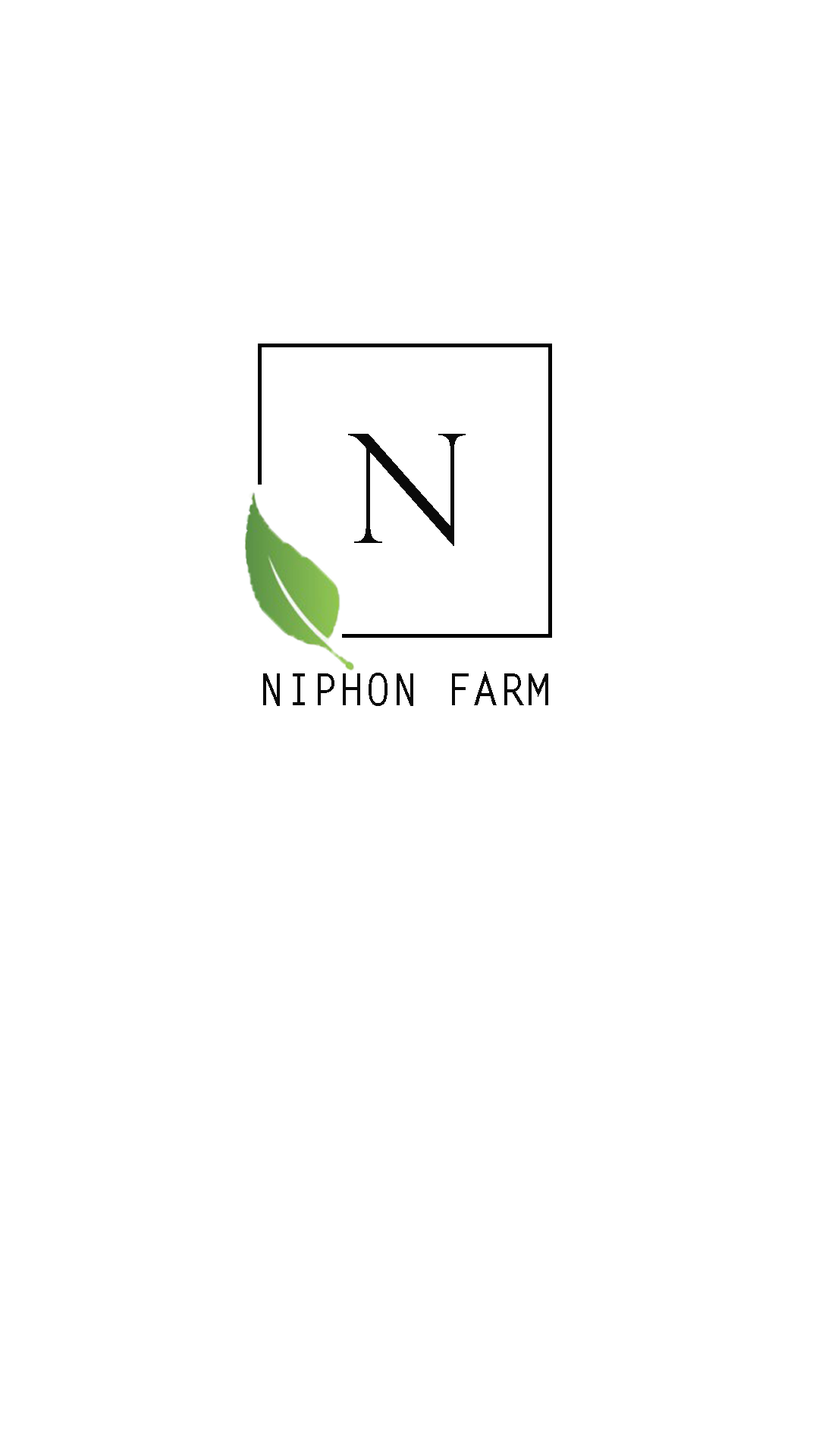
<style>
.page{position:relative;width:819px;height:1456px;background:#ffffff}
.page>*{position:absolute;margin:0}
.t1{font:151.7px "PerpetuaTitlingMT-Light";color:#0a0a0a}
.t2{font:44.5px "LetterGothicStd-Bold";color:#0a0a0a}
</style>
<div class="page">
<p class="t1" style="left:348px;top:434px;width:118px;height:112px">N</p>
<p class="t2" style="left:263px;top:671px;width:285px;height:35px">NIPHON FARM</p>
</div>
